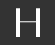
<style>
.page{position:relative;width:55px;height:45px;background:#333333}
.page>*{position:absolute;margin:0}
.t1{font:40px "Audrey-Normal";color:#ffffff}
</style>
<div class="page">
<p class="t1" style="left:16px;top:8px;width:24px;height:29px">H</p>
</div>
